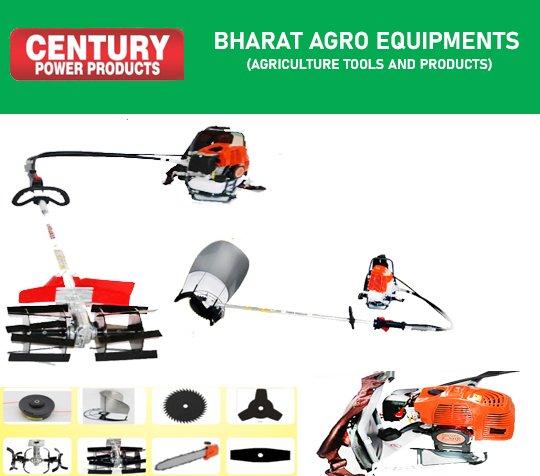
<style>
.page{position:relative;width:540px;height:476px;background:#ffffff}
.page>*{position:absolute;margin:0}
.t1{font:24px "Bahnschrift-Bold";color:#fefffe}
.t2{font:14px "Bahnschrift-Bold";color:#fefffe}
</style>
<div class="page">
<p class="t1" style="left:215px;top:31px;width:304px;height:19px">BHARAT AGRO EQUIPMENTS</p>
<p class="t2" style="left:247px;top:58px;width:245px;height:13px">(AGRICULTURE TOOLS AND PRODUCTS)</p>
</div>
